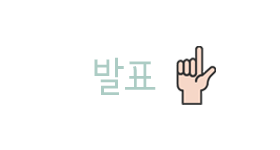
<style>
.page{position:relative;width:280px;height:150px;background:#ffffff}
.page>*{position:absolute;margin:0}
.t1{font:40px "SeN-CM";color:#acccc4}
</style>
<div class="page">
<p class="t1" style="left:94px;top:57px;width:62px;height:38px">발표</p>
</div>
